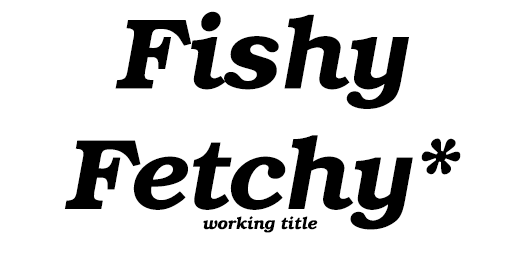
<style>
.page{position:relative;width:512px;height:256px;background:#ffffff}
.page>*{position:absolute;margin:0}
.t1{font:100.4px "URWBookman-DemiItalic";color:#000000}
.t2{font:16.7px "URWBookman-DemiItalic";color:#000000}
</style>
<div class="page">
<p class="t1" style="left:64px;top:11px;width:397px;height:222px;text-align:center">Fishy<br>Fetchy*<br><span class="t2">working title</span></p>
</div>
